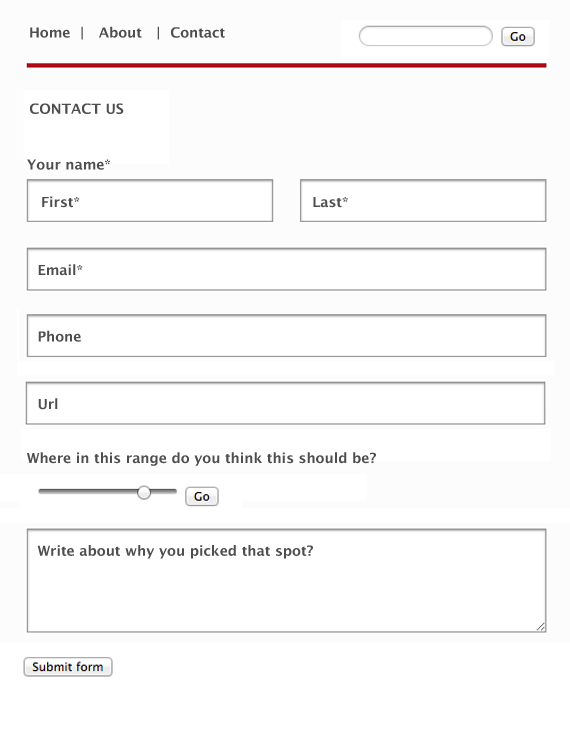
<style>
.page{position:relative;width:570px;height:744px;background:#ffffff}
.page>*{position:absolute;margin:0}
.t1{font:13.9px "LucidaGrande-Bold";color:#4e4e4e}
.t2{font:13.9px "LucidaGrande-Bold";color:#4e4e4e;text-transform:uppercase}
</style>
<div class="page">
<p class="t1" style="left:30px;top:26px;width:195px;height:14px">Home  |   About   |  Contact</p>
<p class="t2" style="left:30px;top:103px;width:94px;height:11px">Contact us</p>
<p class="t1" style="left:27px;top:159px;width:83px;height:11px">Your name*</p>
<p class="t1" style="left:42px;top:196px;width:38px;height:12px">First*</p>
<p class="t1" style="left:313px;top:197px;width:35px;height:11px">Last*</p>
<p class="t1" style="left:38px;top:264px;width:45px;height:12px">Email*</p>
<p class="t1" style="left:38px;top:330px;width:43px;height:12px">Phone</p>
<p class="t1" style="left:38px;top:398px;width:20px;height:12px">Url</p>
<p class="t1" style="left:27px;top:452px;width:349px;height:14px">Where in this range do you think this should be?</p>
<p class="t1" style="left:37px;top:545px;width:276px;height:14px">Write about why you picked that spot?</p>
</div>
